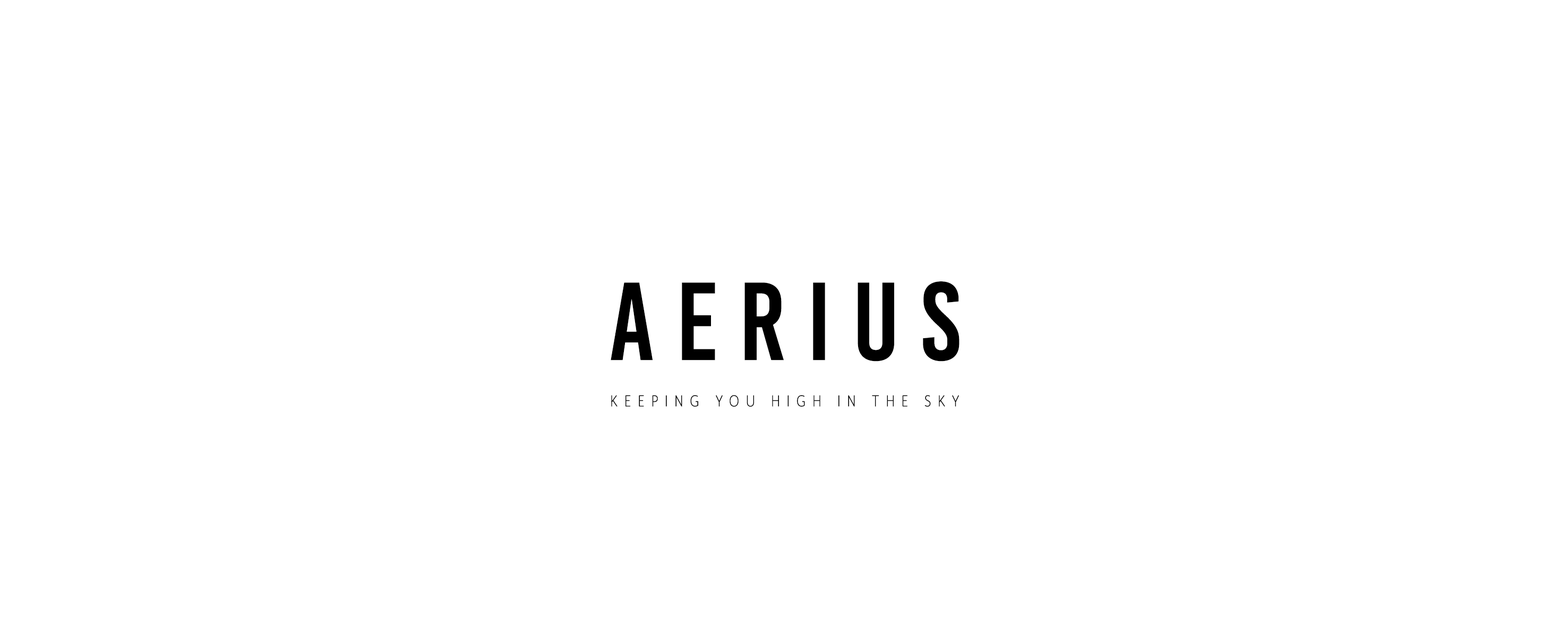
<style>
.page{position:relative;width:1568px;height:627px;background:#ffffff}
.page>*{position:absolute;margin:0}
.t1{font:110.6px "BebasKai";letter-spacing:0.19em;color:#000000}
.t2{font:17.7px "MrEavesXLSanNarOT-Thin";letter-spacing:0.4em;color:#010101;text-transform:uppercase;font-weight:bold}
</style>
<div class="page">
<p class="t1" style="left:611px;top:281px;width:348px;height:81px">AERIUS</p>
<p class="t2" style="left:611px;top:395px;width:348px;height:12px">keeping you high in the sky</p>
</div>
